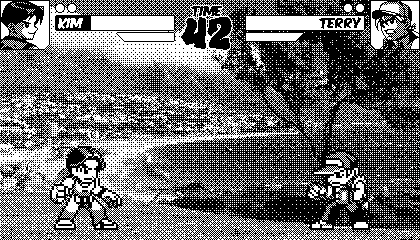
<style>
.page{position:relative;width:420px;height:240px;background:#000000}
.page>*{position:absolute;margin:0}
.t1{font:12px "KomikaAxis";color:#000000}
.t2{font:48px "GrafiteRegular";color:#000000}
.t3{font:12px "KomikaAxis";color:#ffffff}
</style>
<div class="page">
<p class="t1" style="left:191px;top:6px;width:31px;height:11px">TIME</p>
<p class="t2" style="left:181px;top:17px;width:51px;height:33px">42</p>
<p class="t1" style="left:319px;top:17px;width:42px;height:12px">Terry</p>
<p class="t3" style="left:58px;top:18px;width:25px;height:11px">Kim</p>
</div>
